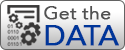
<style>
.page{position:relative;width:125px;height:50px}
.page>*{position:absolute;margin:0}
.t1{font:18px "AvenirNext-Regular";color:#515151;font-weight:bold;scale:1.06 1}
.t2{font:27px "Avenir-Roman";color:#003699;font-weight:bold;scale:1.06 1}
</style>
<div class="page">
<p class="t1" style="left:44px;top:6px;width:67px;height:14px">Get the</p>
<p class="t2" style="left:45px;top:25px;width:74px;height:21px">DATA</p>
</div>
